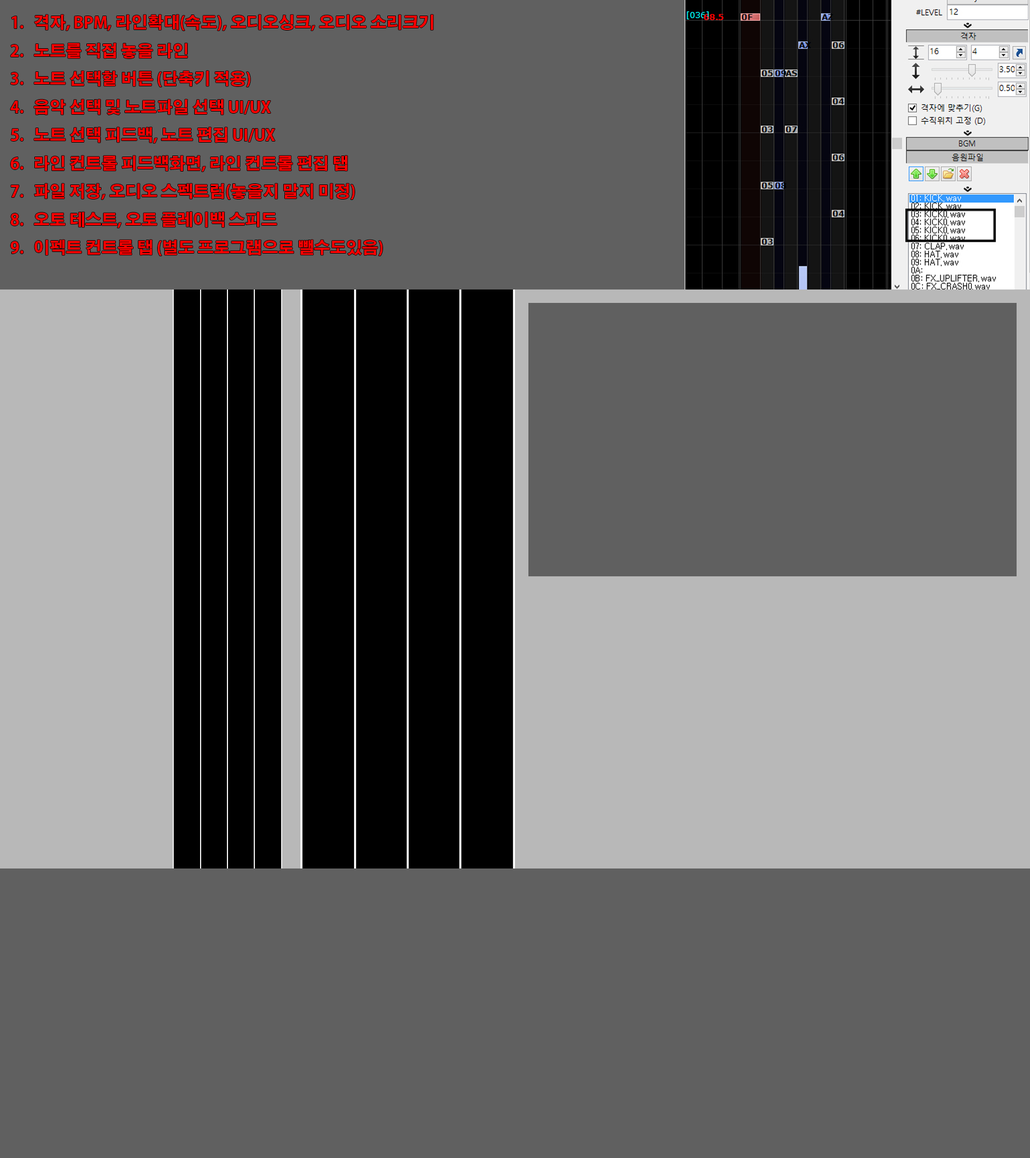
<style>
.page{position:relative;width:1030px;height:1158px;background:#606060}
.page>*{position:absolute;margin:0}
.t1{font:16.1px "AdobeGothicStd-Bold";color:#ff0000}
</style>
<div class="page">
<p class="t1" style="left:10px;top:14px;width:423px;height:242px">격자, BPM, 라인확대(속도), 오디오싱크, 오디오 소리크기<br>노트를 직접 놓을 라인<br>노트 선택할 버튼 (단축키 적용)<br>음악 선택 및 노트파일 선택 UI/UX<br>노트 선택 피드백, 노트 편집 UI/UX<br>라인 컨트롤 피드백화면, 라인 컨트롤 편집 탭<br>파일 저장, 오디오 스펙트럼(놓을지 말지 미정)<br>오토 테스트, 오토 플레이백 스피드<br>이펙트 컨트롤 탭 (별도 프로그램으로 뺄수도있음)</p>
</div>
